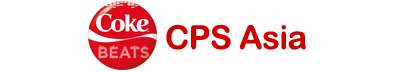
<style>
.page{position:relative;width:399px;height:72px;background:#ffffff}
.page>*{position:absolute;margin:0}
.t1{font:33px "ArialRoundedMTBold";letter-spacing:-0.02em;color:#d10000}
</style>
<div class="page">
<p class="t1" style="left:166px;top:24px;width:140px;height:26px">CPS Asia</p>
</div>
